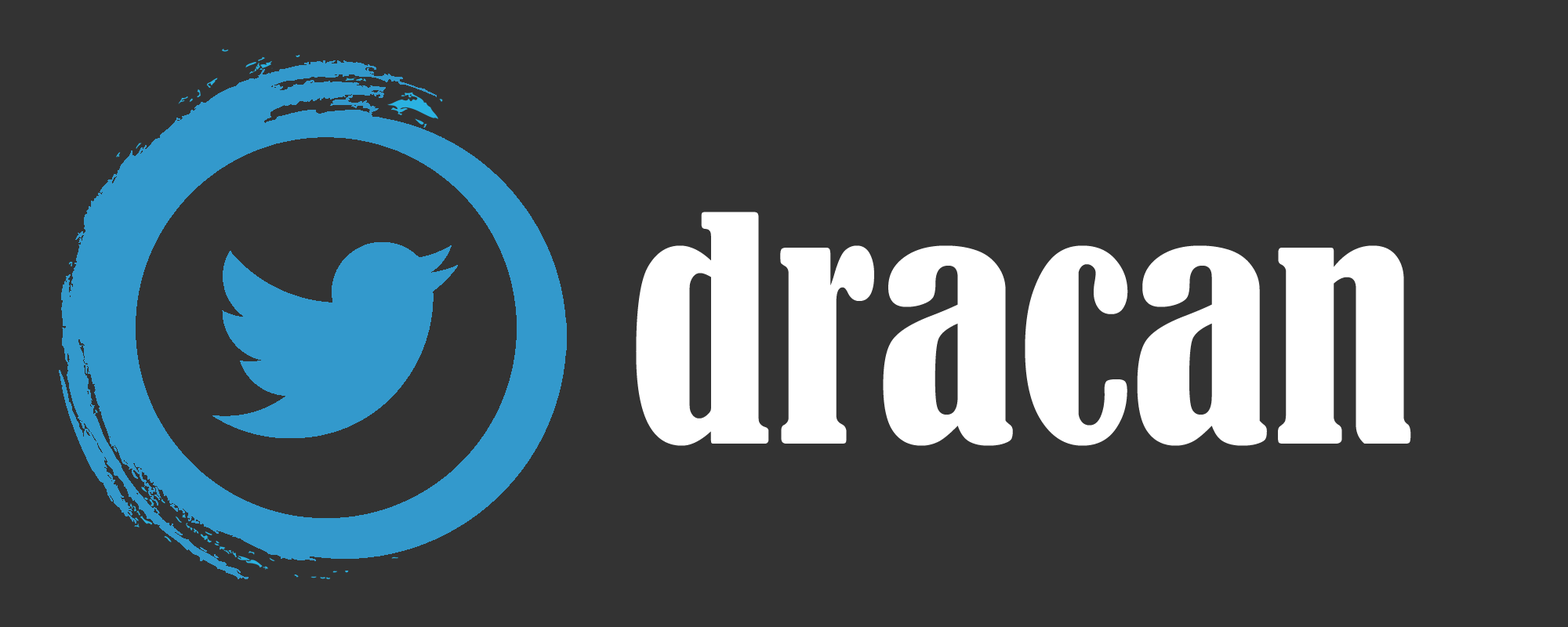
<style>
.page{position:relative;width:1568px;height:627px;background:#333333}
.page>*{position:absolute;margin:0}
.t1{font:294px "BernardMT-Condensed";color:#ffffff}
</style>
<div class="page">
<p class="t1" style="left:636px;top:212px;width:775px;height:234px">dracan</p>
</div>
